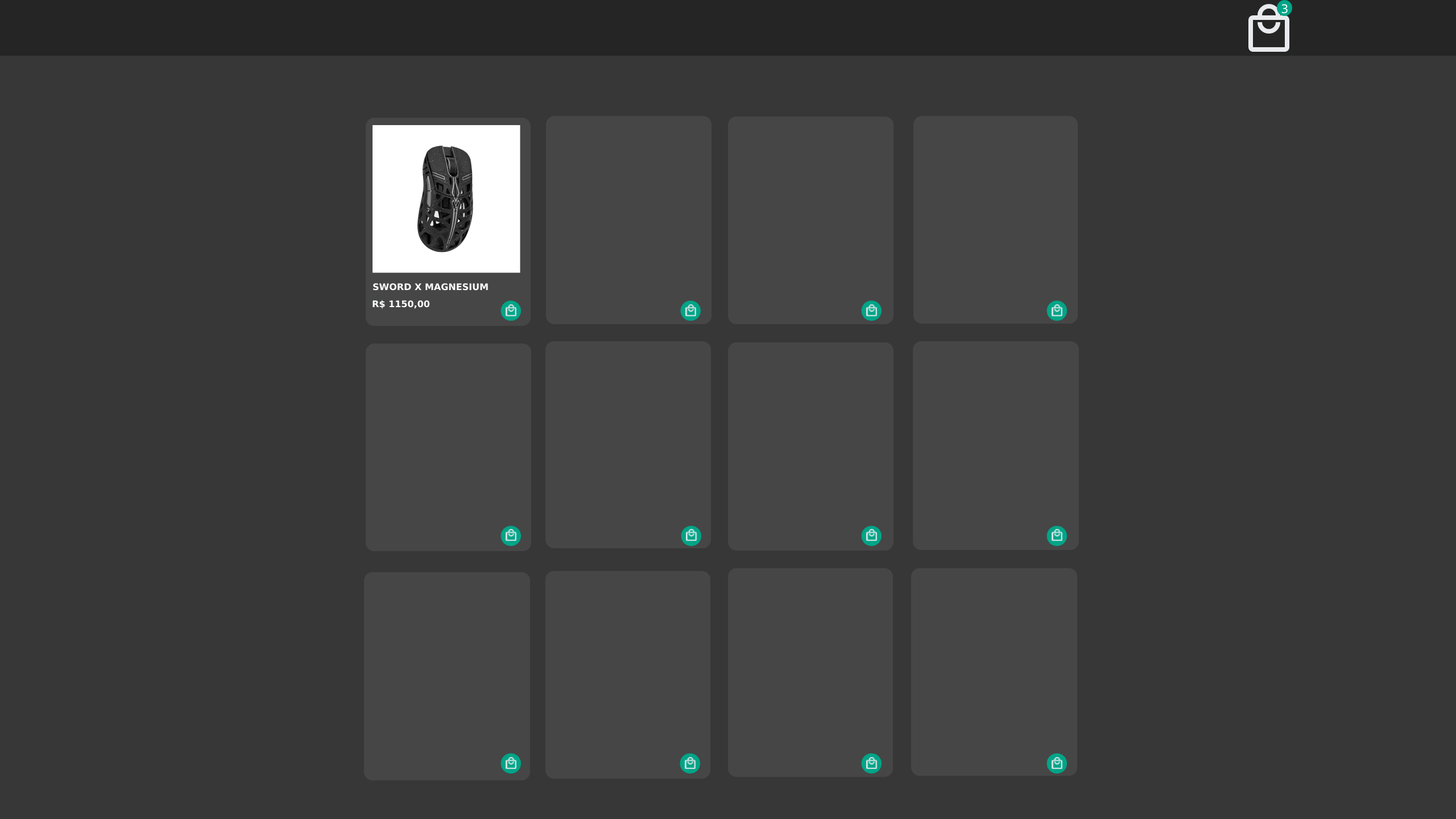
<style>
.page{position:relative;width:1456px;height:819px;background:#373737}
.page>*{position:absolute;margin:0}
.t1{font:11.9px "DejaVuSans";color:#ffffff}
.t2{font:9.1px "DejaVuSans-Bold";color:#ffffff}
</style>
<div class="page">
<p class="t1" style="left:1281px;top:4px;width:7px;height:10px">3</p>
<p class="t2" style="left:373px;top:283px;width:115px;height:8px">SWORD X MAGNESIUM</p>
<p class="t2" style="left:373px;top:300px;width:57px;height:9px">R$ 1150,00</p>
</div>
